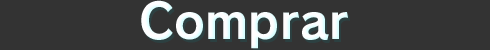
<style>
.page{position:relative;width:490px;height:50px;background:#333333}
.page>*{position:absolute;margin:0}
.t1{font:48px "RodinPro-B";color:#fffeff}
</style>
<div class="page">
<p class="t1" style="left:141px;top:0px;width:207px;height:49px">Comprar</p>
</div>
